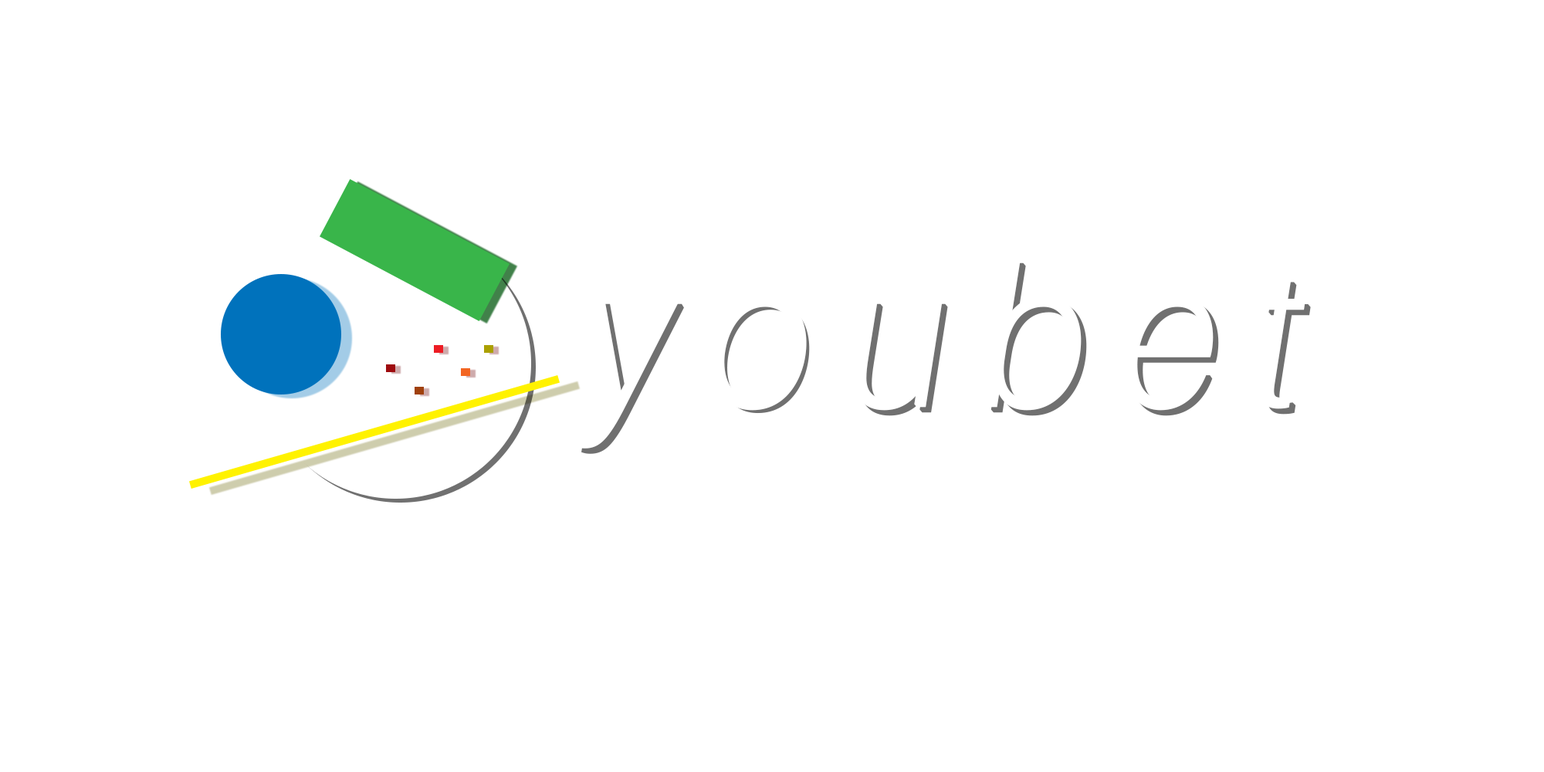
<style>
.page{position:relative;width:1544px;height:772px;background:#ffffff}
.page>*{position:absolute;margin:0}
.t1{font:196.9px "Aileron-ThinItalic";font-weight:bold;scale:0.89 1}
</style>
<div class="page">
<p class="t1" style="left:581px;top:263px;width:730px;height:191px">y o u b e t</p>
</div>
